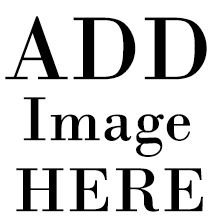
<style>
.page{position:relative;width:220px;height:220px;background:#ffffff}
.page>*{position:absolute;margin:0}
.t1{font:94px "BodoniMT";color:#000000}
.t2{font:65px "BodoniMT";color:#000000}
</style>
<div class="page">
<p class="t1" style="left:5px;top:16px;width:202px;height:64px">ADD</p>
<p class="t2" style="left:23px;top:97px;width:167px;height:60px">Image</p>
<p class="t2" style="left:16px;top:168px;width:187px;height:44px">HERE</p>
</div>
